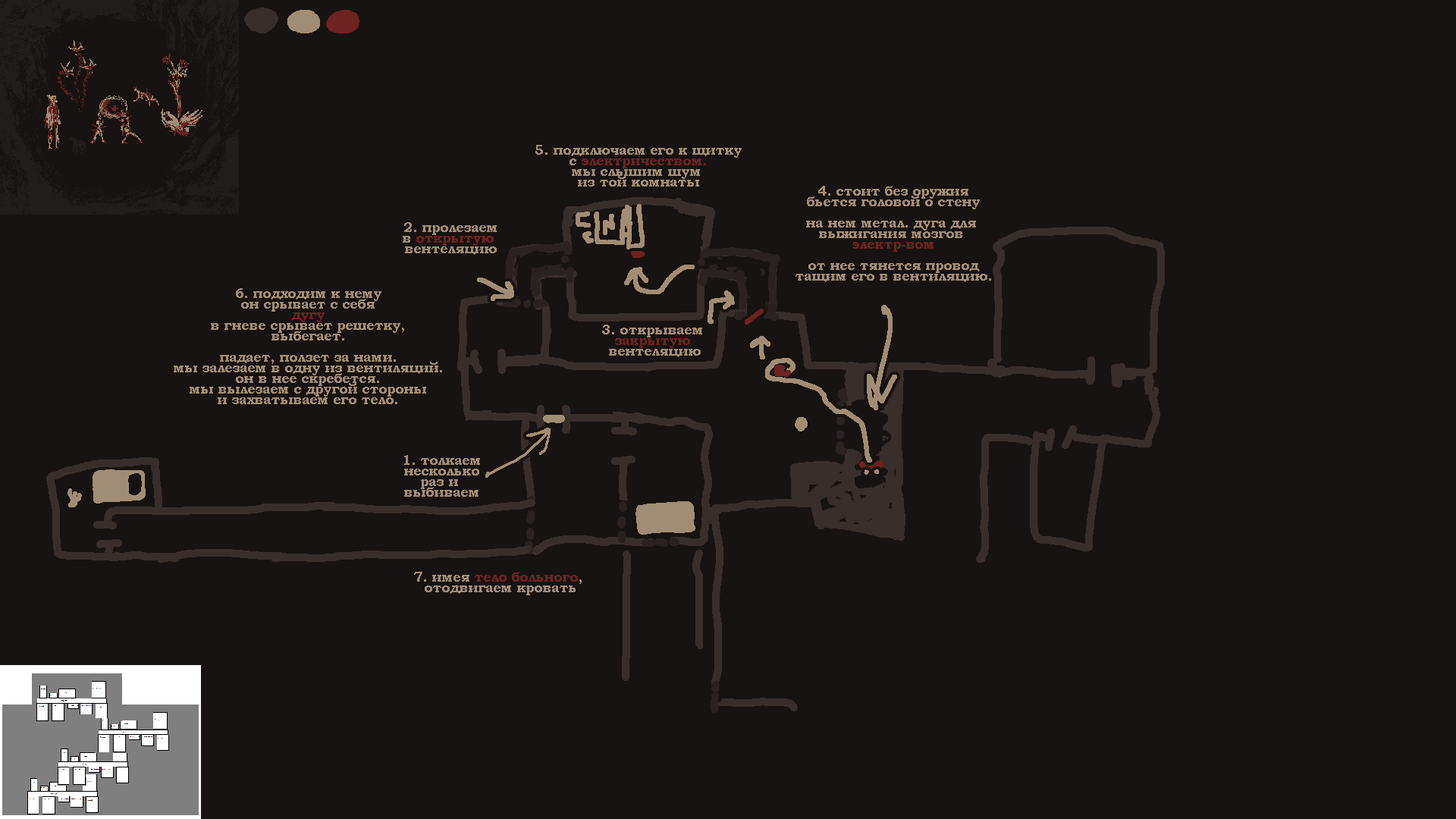
<style>
.page{position:relative;width:1456px;height:819px;background:#171312}
.page>*{position:absolute;margin:0}
.t1{font:13.6px/10.6px "BookmanOldStyle-Bold";color:#a18d75}
.t2{font:13.6px/10.6px "BookmanOldStyle-Bold";color:#6e2222}
</style>
<div class="page">
<p class="t1" style="left:535px;top:145px;width:207px;height:42px;text-align:center">5. подключаем его к щитку<br>с <span class="t2">электричеством.<br></span>мы слышим шум <br>из той комнаты</p>
<p class="t1" style="left:795px;top:186px;width:196px;height:96px;text-align:center">4. стоит без оружия<br>бьется головой о стену<br><br>на нем метал. дуга для <br>выжигания мозгов <br><span class="t2">электр-вом<br></span><br>от нее тянется провод<br>тащим его в вентиляцию.</p>
<p class="t1" style="left:403px;top:222px;width:94px;height:33px;text-align:center">2. пролезаем<br>в <span class="t2">открытую <br></span>вентеляцию</p>
<p class="t1" style="left:174px;top:288px;width:268px;height:116px;text-align:center">6. подходим к нему<br>он срывает с себя<br><span class="t2">дугу<br></span>в гневе срывает решетку,<br>выбегает.<br><br>падает, ползет за нами.<br>мы залезаем в одну из вентиляций.<br>он в нее скребется.<br>мы вылезаем с другой стороны<br>и захватываем его тело.</p>
<p class="t1" style="left:602px;top:325px;width:100px;height:32px;text-align:center">3. открываем <br><span class="t2">закрытую <br></span>вентеляцию</p>
<p class="t1" style="left:404px;top:455px;width:76px;height:42px;text-align:center">1. толкаем<br>несколько<br>раз и <br>выбиваем</p>
<p class="t1" style="left:414px;top:572px;width:168px;height:23px;text-align:center">7. имея <span class="t2">тело больного</span>, <br>отодвигаем кровать</p>
</div>
